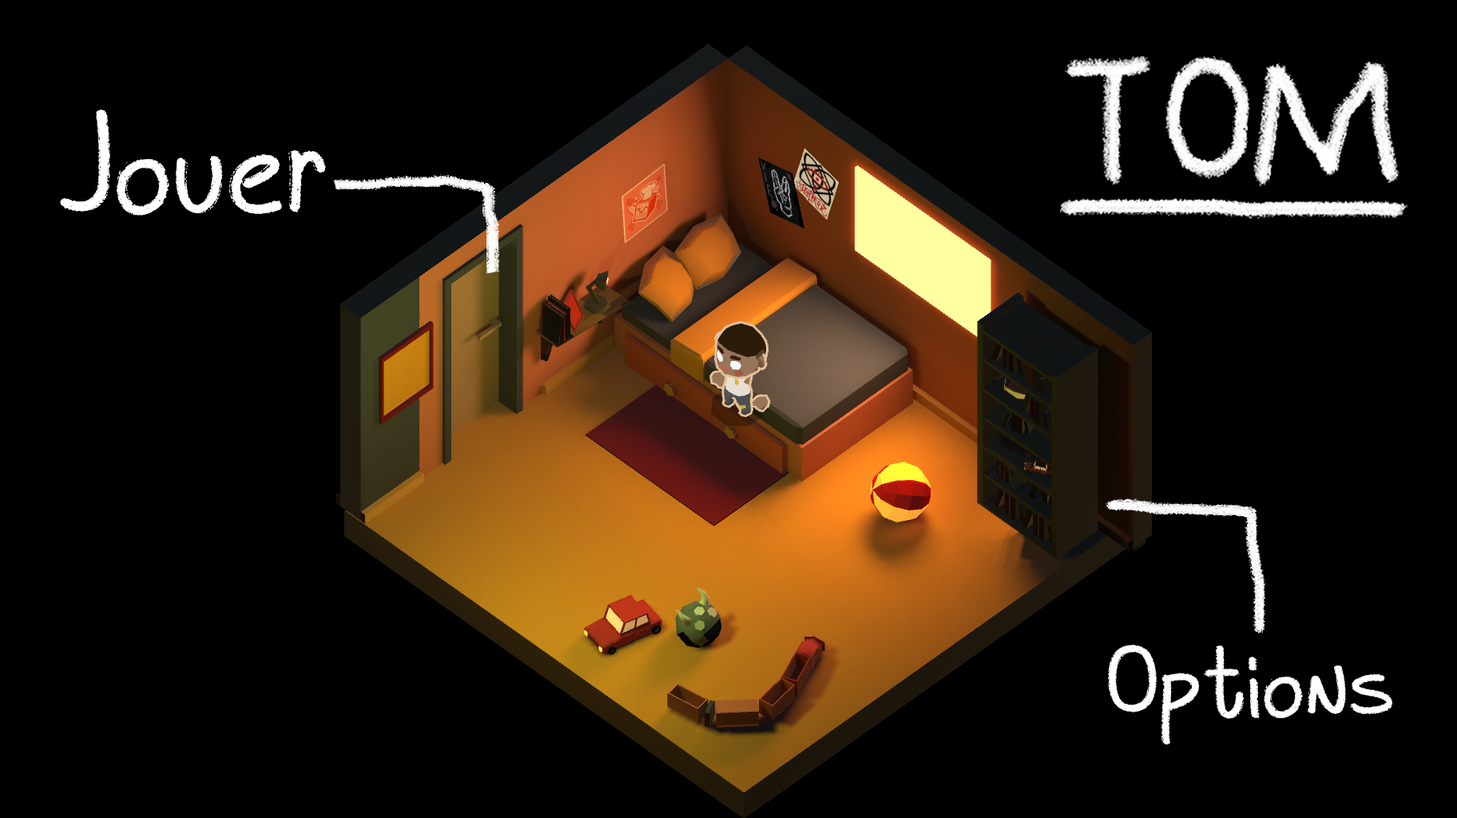
<style>
.page{position:relative;width:1457px;height:818px;background:#000000}
.page>*{position:absolute;margin:0}
.t1{font:119.9px "Chalky-Regular";color:#ffffff}
.t2{font:87.9px "Chalky-Regular";color:#ffffff}
</style>
<div class="page">
<p class="t1" style="left:60px;top:109px;width:266px;height:107px">Jouer</p>
<p class="t2" style="left:1108px;top:645px;width:285px;height:100px">Options</p>
</div>
